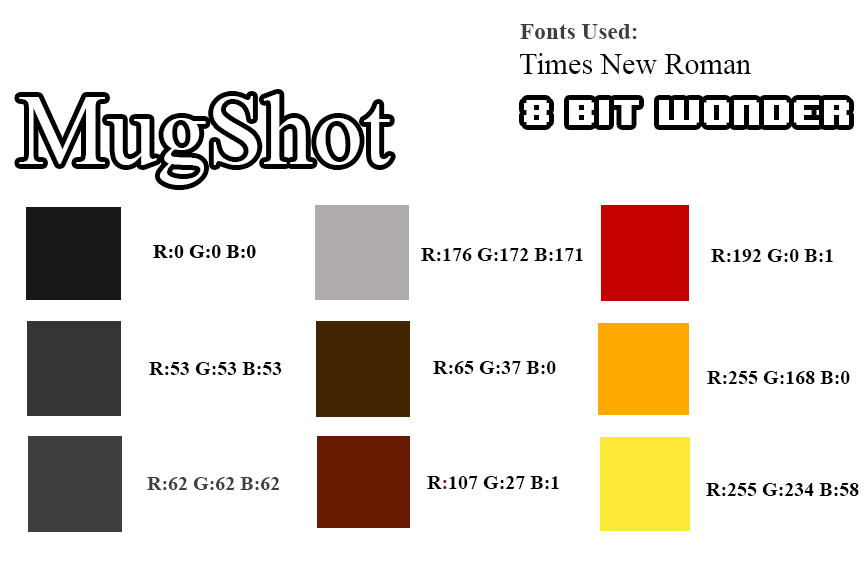
<style>
.page{position:relative;width:868px;height:561px;background:#ffffff}
.page>*{position:absolute;margin:0}
.t1{font:23.3px "TimesNewRomanPS-BoldMT";color:#3e3e3e}
.t2{font:30px "TimesNewRomanPSMT";color:#060606}
.t3{font:100px "TimesNewRomanPSMT";color:#ffffff}
.t4{font:30px "8BITWONDERNominal";color:#ffffff}
.t5{font:12px "TimesNewRomanPS-BoldMT";color:#000000}
.t6{font:12px "TimesNewRomanPS-BoldMT";color:#3e3e3e}
.t7{font:12px "TimesNewRomanPS-BoldMT";color:#681b01}
</style>
<div class="page">
<p class="t1" style="left:520px;top:24px;width:117px;height:15px">Fonts Used:</p>
<p class="t2" style="left:520px;top:53px;width:231px;height:22px">Times New Roman</p>
<p class="t3" style="left:19px;top:94px;width:372px;height:91px">MugShot</p>
<p class="t4" style="left:524px;top:100px;width:325px;height:25px">8 bit wonder</p>
<p class="t5" style="left:421px;top:248px;width:162px;height:13px">R:176 G:172 B:171</p>
<p class="t5" style="left:711px;top:249px;width:122px;height:13px">R:192 G:0 B:1</p>
<p class="t5" style="left:149px;top:362px;width:133px;height:13px">R:53 G:53 B:53</p>
<p class="t5" style="left:433px;top:361px;width:123px;height:13px">R:65 G:37 B:0</p>
<p class="t5" style="left:707px;top:371px;width:143px;height:13px">R:255 G:168 B:0</p>
<p class="t6" style="left:147px;top:477px;width:133px;height:13px">R:62 G:62 B:62</p>
<p class="t5" style="left:427px;top:476px;width:132px;height:13px">R<span class="t7">:</span>107 G:27 B:1</p>
<p class="t5" style="left:706px;top:483px;width:153px;height:13px">R:255 G:234 B:58</p>
</div>
